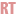
<style>
.page{position:relative;width:16px;height:16px;background:#ffffff}
.page>*{position:absolute;margin:0}
.t1{font:16.7px "AbadiMT-CondensedExtraBold";color:#de9292}
</style>
<div class="page">
<p class="t1" style="left:0px;top:2px;width:16px;height:12px">RT</p>
</div>
